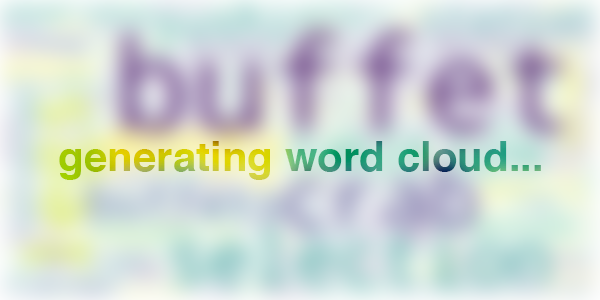
<style>
.page{position:relative;width:600px;height:300px}
.page>*{position:absolute;margin:0}
.t1{font:42px "Helvetica-Bold"}
</style>
<div class="page">
<p class="t1" style="left:59px;top:141px;width:482px;height:39px">generating word cloud...</p>
</div>
